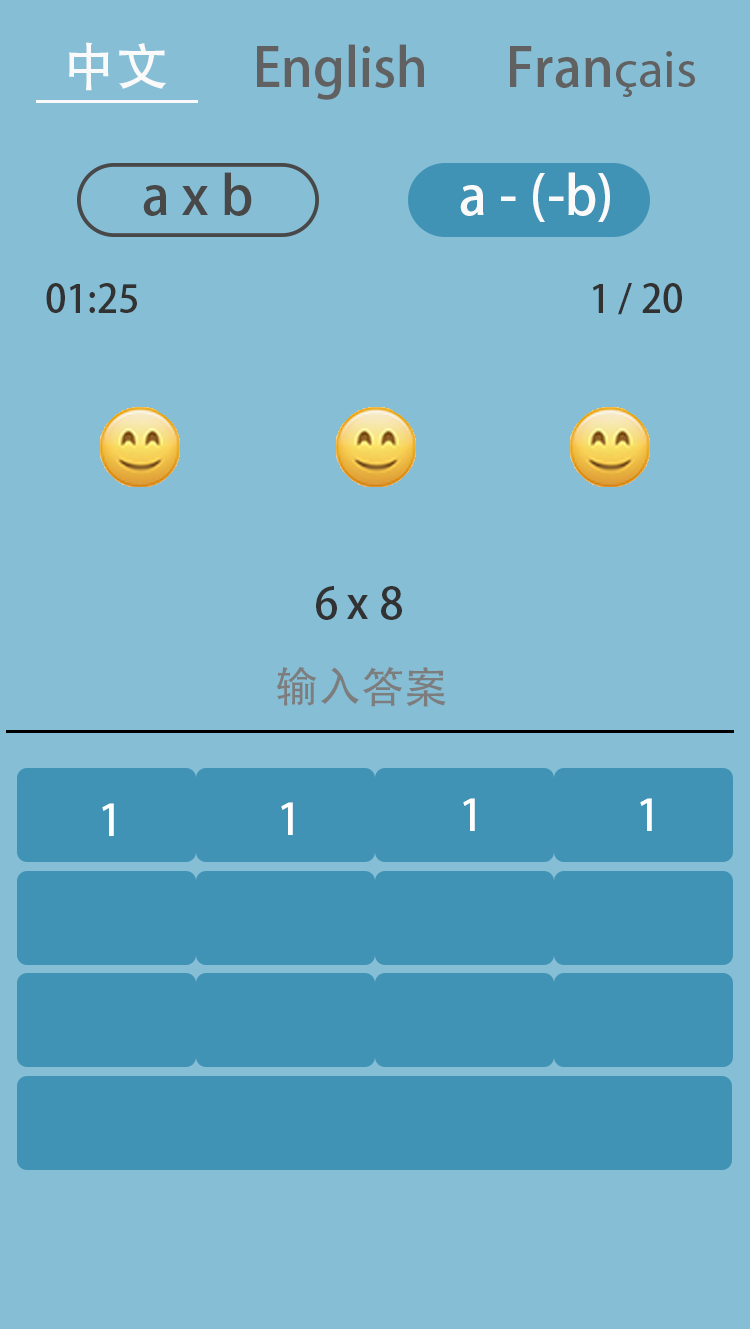
<style>
.page{position:relative;width:750px;height:1330px;background:#86bed6}
.page>*{position:absolute;margin:0}
.t1{font:53px "AdobeHeitiStd-Regular";color:#fafafa}
.t2{font:53px "AdobeHeitiStd-Regular";color:#616161}
.t3{font:53px "MyriadPro-Regular";color:#616161}
.t4{font:53px "AdobeHeitiStd-Regular";color:#484848}
.t5{font:38px "AdobeHeitiStd-Regular";color:#323232}
.t6{font:43px "AdobeHeitiStd-Regular";color:#323232}
.t7{font:43px "AdobeHeitiStd-Regular";color:#7d7d7d}
.t8{font:43px "AdobeHeitiStd-Regular";color:#ffffff}
</style>
<div class="page">
<p class="t1" style="left:69px;top:42px;width:98px;height:49px">中文</p>
<p class="t2" style="left:257px;top:44px;width:167px;height:56px">English</p>
<p class="t2" style="left:510px;top:46px;width:185px;height:51px">Fran<span class="t3">çais</span></p>
<p class="t4" style="left:143px;top:172px;width:109px;height:44px">a x b</p>
<p class="t1" style="left:460px;top:172px;width:150px;height:50px">a - (-b)</p>
<p class="t5" style="left:46px;top:283px;width:91px;height:30px">01:25</p>
<p class="t5" style="left:593px;top:283px;width:89px;height:32px">1 / 20</p>
<p class="t6" style="left:316px;top:586px;width:86px;height:34px">6 x 8</p>
<p class="t7" style="left:276px;top:666px;width:170px;height:41px">输入答案</p>
<p class="t8" style="left:463px;top:798px;width:12px;height:33px">1</p>
<p class="t8" style="left:640px;top:798px;width:12px;height:33px">1</p>
<p class="t8" style="left:102px;top:803px;width:12px;height:33px">1</p>
<p class="t8" style="left:281px;top:802px;width:12px;height:33px">1</p>
</div>
